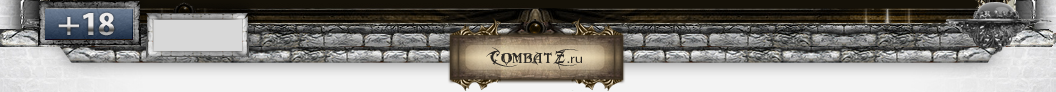
<style>
.page{position:relative;width:1056px;height:92px}
.page>*{position:absolute;margin:0}
.t1{font:34px "MyriadPro-BoldCond";scale:1.18 1}
.t2{font:12.8px "MetalMacabre";color:#2c2824;scale:1.18 1}
.t3{font:12.8px "MyriadPro-Regular";color:#2c2824;scale:1.18 1}
</style>
<div class="page">
<p class="t1" style="left:58px;top:12px;width:57px;height:24px">+18</p>
<p class="t2" style="left:486px;top:47px;width:96px;height:24px;text-align:center">CombatZ<span class="t3">.ru</span></p>
</div>
